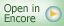
<style>
.page{position:relative;width:64px;height:26px}
.page>*{position:absolute;margin:0}
.t1{font:10.5px/10px "Tahoma";color:#336633}
</style>
<div class="page">
<p class="t1" style="left:4px;top:4px;width:36px;height:19px">Open in<br>Encore</p>
</div>
